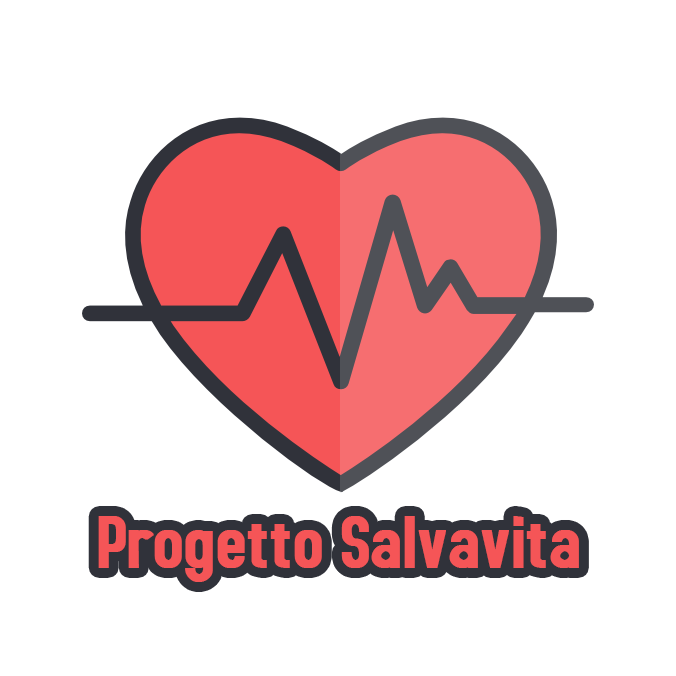
<style>
.page{position:relative;width:676px;height:676px;background:#ffffff}
.page>*{position:absolute;margin:0}
.t1{font:76px "AccidentalPresidency";color:#f55557;font-weight:bold}
</style>
<div class="page">
<p class="t1" style="left:98px;top:516px;width:481px;height:66px">Progetto Salvavita</p>
</div>
